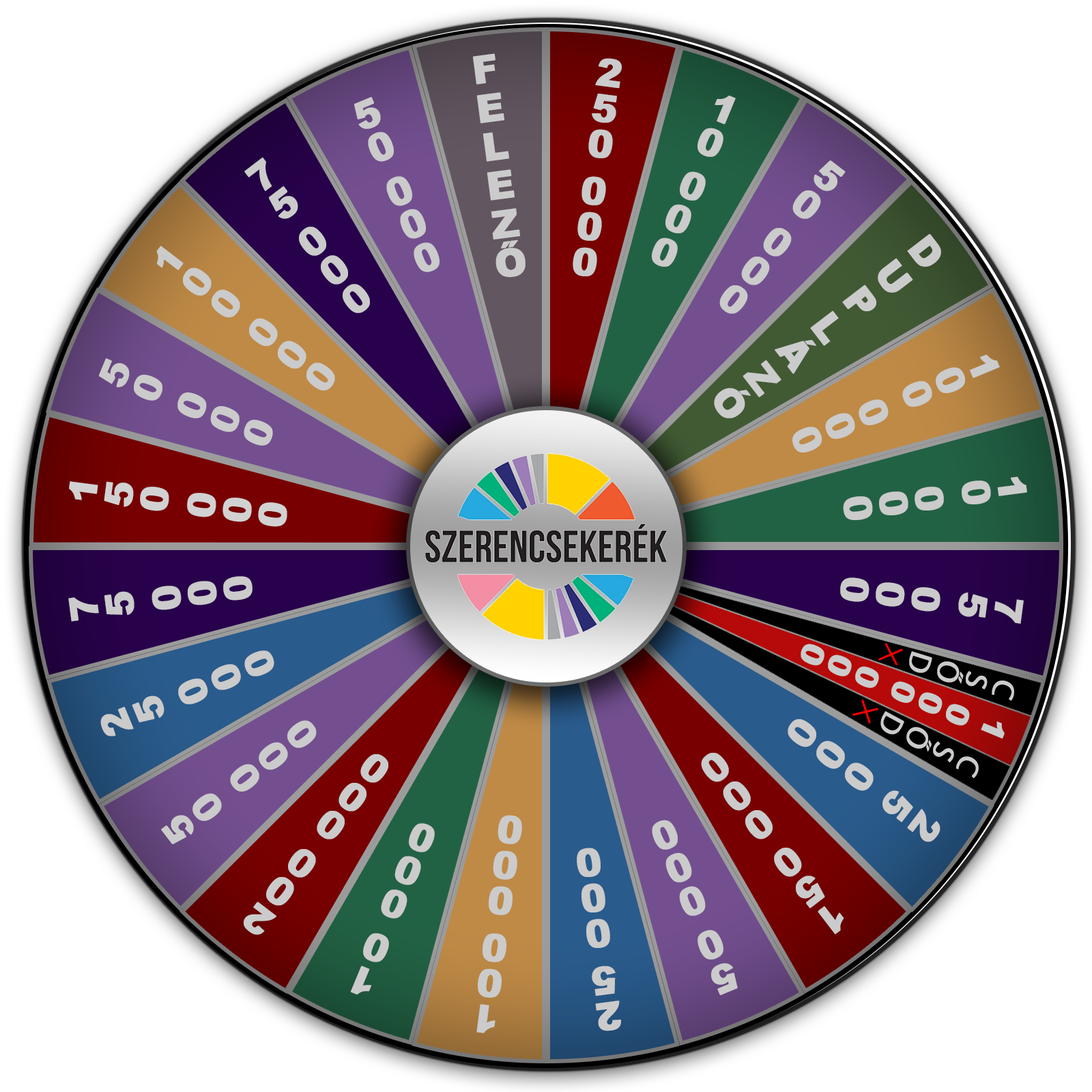
<style>
.page{position:relative;width:1092px;height:1092px;background:#ffffff}
.page>*{position:absolute;margin:0}
.t1{font:38.2px "Arial-Black";letter-spacing:0.02em;color:#cbcbcb;font-weight:bold}
.t2{font:38.2px "Arial-Black";letter-spacing:-0.06em;color:#cbcbcb;font-weight:bold}
.t3{font:38.2px "Arial-Black";letter-spacing:0.08em;color:#cbcbcb;font-weight:bold}
.t4{font:38.2px "Arial-Black";letter-spacing:-0.06em;color:#d2d2d2;font-weight:bold}
.t5{font:31.4px "Arial-Black";letter-spacing:-0.06em;color:#cbcbcb;font-weight:bold}
.t6{font:31.4px "MyriadPro-Regular";letter-spacing:-0.06em;color:#cbcbcb;font-weight:bold}
</style>
<div class="page">
<p class="t1" style="left:473px;top:53px;width:53px;height:224px;rotate:-8deg">FELEZŐ</p>
<p class="t2" style="left:573px;top:58px;width:49px;height:218px;rotate:7deg">250 000</p>
<p class="t2" style="left:354px;top:97px;width:86px;height:175px;rotate:-23deg">50 000</p>
<p class="t2" style="left:652px;top:96px;width:84px;height:171px;rotate:22deg">10 000</p>
<p class="t2" style="left:244px;top:157px;width:126px;height:156px;rotate:-38deg">75 000</p>
<p class="t2" style="left:719px;top:160px;width:127px;height:154px;rotate:38deg">50 000</p>
<p class="t2" style="left:156px;top:246px;width:179px;height:144px;rotate:-52deg">100 000</p>
<p class="t3" style="left:714px;top:234px;width:227px;height:184px;rotate:53deg">DUPLÁZÓ</p>
<p class="t2" style="left:99px;top:358px;width:174px;height:88px;rotate:-67deg">50 000</p>
<p class="t2" style="left:792px;top:354px;width:208px;height:98px;rotate:67deg">100 000</p>
<p class="t4" style="left:69px;top:481px;width:218px;height:46px;rotate:-83deg">150 000</p>
<p class="t2" style="left:843px;top:476px;width:184px;height:44px;rotate:82deg">10 000</p>
<p class="t2" style="left:68px;top:576px;width:185px;height:46px;rotate:-98deg">75 000</p>
<p class="t2" style="left:840px;top:577px;width:184px;height:47px;rotate:97deg">75 000</p>
<p class="t2" style="left:100px;top:650px;width:174px;height:86px;rotate:-113deg">25 000</p>
<p class="t5" style="left:801px;top:644px;width:204px;height:95px;rotate:112deg">1 000 000</p>
<p class="t6" style="left:909px;top:651px;width:105px;height:50px;rotate:107deg">CSŐD</p>
<p class="t6" style="left:880px;top:711px;width:99px;height:67px;rotate:118deg">CSŐD</p>
<p class="t2" style="left:161px;top:720px;width:156px;height:124px;rotate:-128deg">50 000</p>
<p class="t2" style="left:788px;top:719px;width:152px;height:123px;rotate:127deg">25 000</p>
<p class="t2" style="left:244px;top:754px;width:144px;height:181px;rotate:-143deg">200 000</p>
<p class="t2" style="left:701px;top:753px;width:143px;height:181px;rotate:142deg">150 000</p>
<p class="t2" style="left:476px;top:815px;width:46px;height:218px;rotate:-173deg">100 000</p>
<p class="t2" style="left:652px;top:820px;width:86px;height:175px;rotate:157deg">50 000</p>
<p class="t2" style="left:350px;top:823px;width:85px;height:171px;rotate:-158deg">10 000</p>
<p class="t2" style="left:577px;top:848px;width:44px;height:183px;rotate:172deg">25 000</p>
</div>
